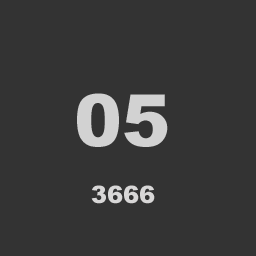
<style>
.page{position:relative;width:256px;height:256px;background:#333333}
.page>*{position:absolute;margin:0}
.t1{font:72px "Arial-Black";color:#d2d2d2}
.t2{font:24px "Arial-Black";color:#d8d7d7}
</style>
<div class="page">
<p class="t1" style="left:77px;top:93px;width:91px;height:54px">05</p>
<p class="t2" style="left:91px;top:185px;width:64px;height:19px">3666</p>
</div>
